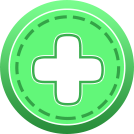
<style>
.page{position:relative;width:134px;height:134px;background:#ffffff}
.page>*{position:absolute;margin:0}
.t1{font:140px "FredokaOne-Regular";color:#ffffff}
</style>
<div class="page">
<p class="t1" style="left:34px;top:36px;width:68px;height:67px">+</p>
</div>
